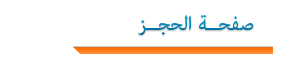
<style>
.page{position:relative;width:282px;height:69px;background:#ffffff}
.page>*{position:absolute;margin:0}
.t1{font:28px "AdobeArabic-Regular";color:#0076a9}
</style>
<div class="page">
<p class="t1" style="left:138px;top:15px;width:116px;height:20px">صفحــة الحجــز</p>
</div>
